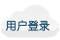
<style>
.page{position:relative;width:60px;height:40px;background:#ffffff}
.page>*{position:absolute;margin:0}
.t1{font:10.7px "YouYuan";color:#124364;font-weight:bold}
</style>
<div class="page">
<p class="t1" style="left:6px;top:20px;width:44px;height:11px">用户登录</p>
</div>
